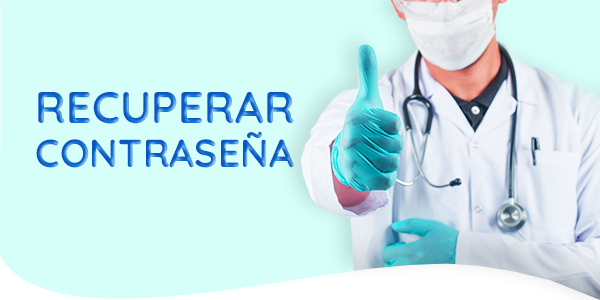
<style>
.page{position:relative;width:600px;height:300px;background:#d6fffa}
.page>*{position:absolute;margin:0}
.t1{font:44.1px "Quicksand-Bold"}
.t2{font:39px "Quicksand-Bold"}
</style>
<div class="page">
<p class="t1" style="left:38px;top:92px;width:256px;height:32px">RECUPERAR</p>
<p class="t2" style="left:36px;top:131px;width:258px;height:37px">CONTRASEÑA</p>
</div>
